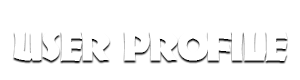
<style>
.page{position:relative;width:300px;height:80px;background:#ffffff}
.page>*{position:absolute;margin:0}
.t1{font:41.5px "Informal011BT-Roman";letter-spacing:-0.06em;color:#ffffff;font-weight:bold}
</style>
<div class="page">
<p class="t1" style="left:13px;top:30px;width:275px;height:31px">User Profile</p>
</div>
